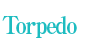
<style>
.page{position:relative;width:97px;height:46px;background:#ffffff}
.page>*{position:absolute;margin:0}
.t1{font:24px "RyuminPro-ExBold";letter-spacing:-0.08em;color:#1dbcc0;scale:0.9 1}
</style>
<div class="page">
<p class="t1" style="left:2px;top:16px;width:75px;height:22px">Torpedo</p>
</div>
